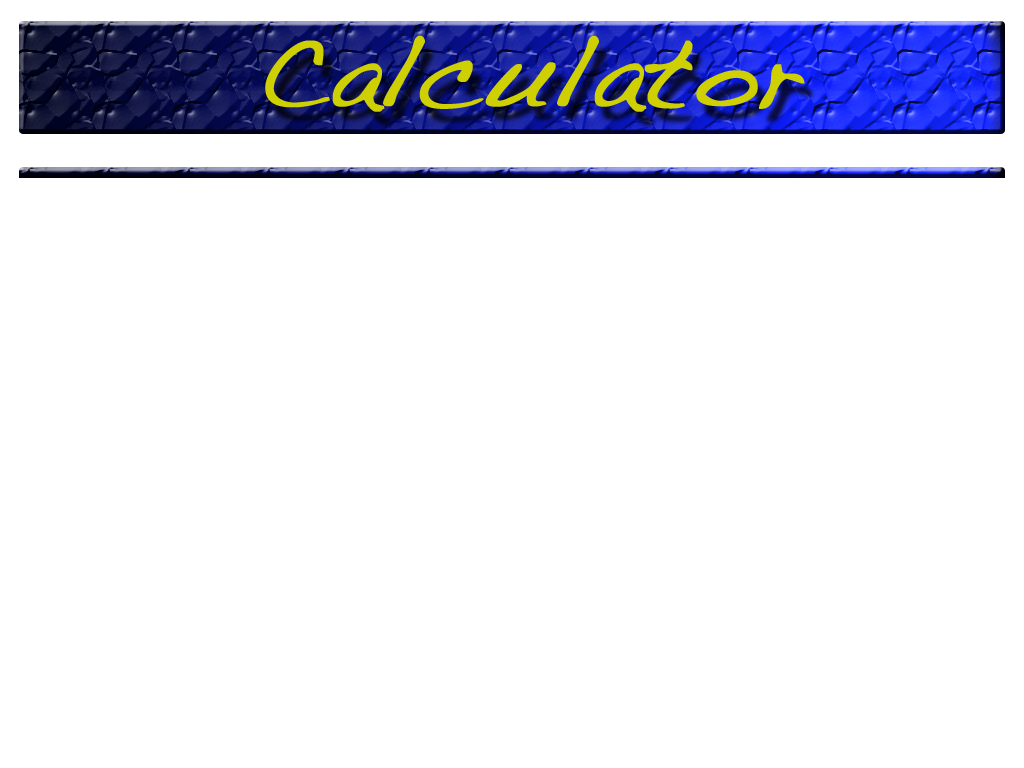
<style>
.page{position:relative;width:1024px;height:768px;background:#ffffff}
.page>*{position:absolute;margin:0}
.t1{font:99px "Handwriting-Dakota";letter-spacing:0.008em;color:#ced004;font-weight:bold}
</style>
<div class="page">
<p class="t1" style="left:265px;top:35px;width:540px;height:77px">Calculator</p>
</div>
